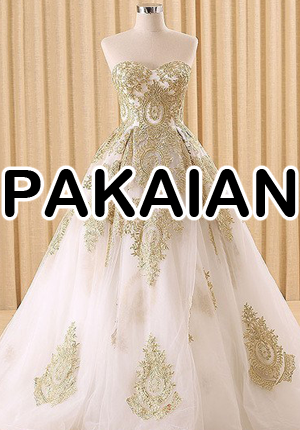
<style>
.page{position:relative;width:300px;height:430px}
.page>*{position:absolute;margin:0}
.t1{font:65.1px "ArialRoundedMTBold";color:#000000}
</style>
<div class="page">
<p class="t1" style="left:5px;top:169px;width:291px;height:48px">PAKAIAN</p>
</div>
